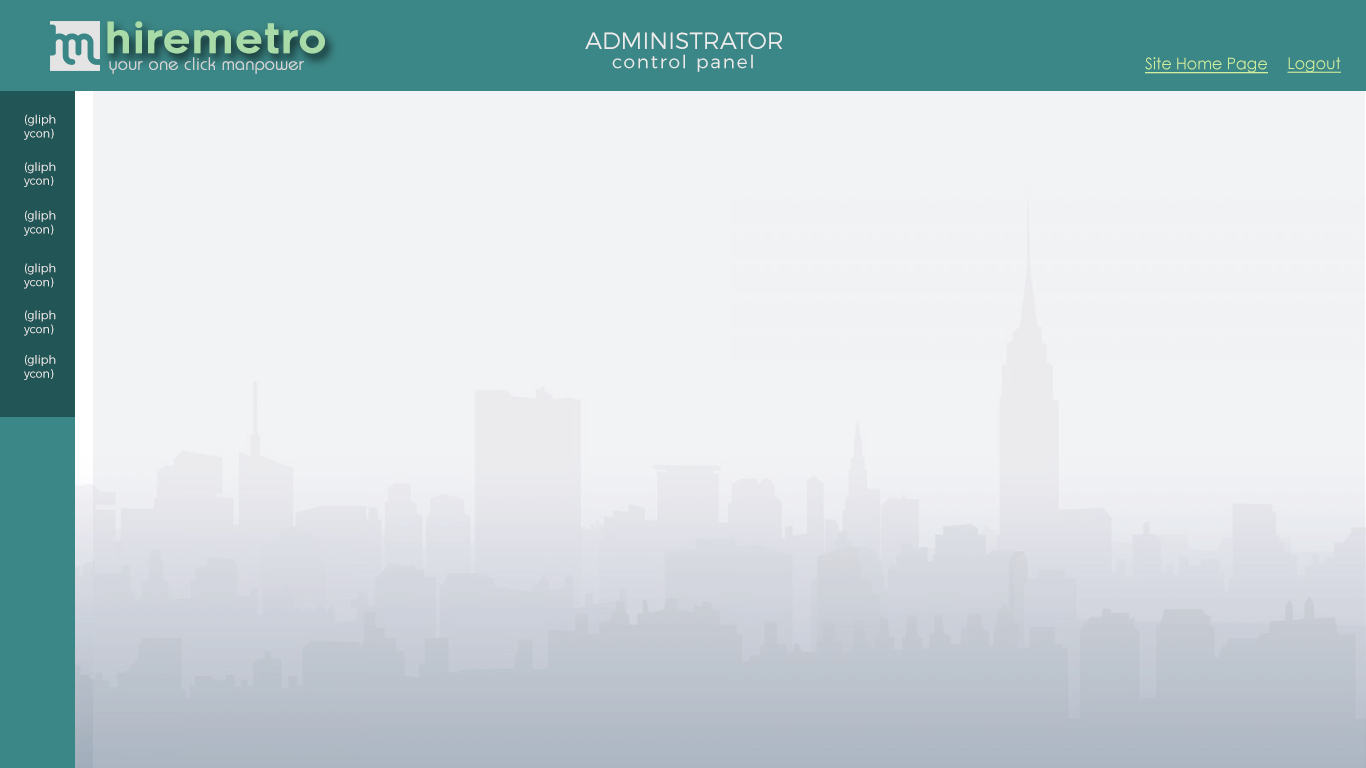
<style>
.page{position:relative;width:1366px;height:768px;background:#f2f3f5}
.page>*{position:absolute;margin:0}
.t1{font:42.1px "Renogare-Regular";color:#a8dba8}
.t2{font:23.6px "Montserrat-Light";color:#ebebeb}
.t3{font:18.4px "Montserrat-Light";letter-spacing:0.1em;color:#ebebeb}
.t4{font:17.5px "Brie-Light";color:#d5d5d5;font-weight:bold}
.t5{font:16.1px "CenturyGothic";color:#cff09e;text-decoration:underline}
.t6{font:11.5px "Montserrat-Light";color:#ebebeb}
</style>
<div class="page">
<p class="t1" style="left:107px;top:21px;width:218px;height:33px">hiremetro</p>
<p class="t2" style="left:585px;top:32px;width:198px;height:17px">ADMINISTRATOR</p>
<p class="t3" style="left:612px;top:54px;width:141px;height:18px">control panel</p>
<p class="t4" style="left:109px;top:57px;width:195px;height:17px">your one click manpower</p>
<p class="t5" style="left:1145px;top:57px;width:123px;height:17px">Site Home Page</p>
<p class="t5" style="left:1287px;top:57px;width:54px;height:16px">Logout</p>
<p class="t6" style="left:24px;top:114px;width:32px;height:26px">(gliph<br>ycon)</p>
<p class="t6" style="left:24px;top:162px;width:32px;height:25px">(gliph<br>ycon)</p>
<p class="t6" style="left:24px;top:210px;width:32px;height:26px">(gliph<br>ycon)</p>
<p class="t6" style="left:24px;top:263px;width:32px;height:26px">(gliph<br>ycon)</p>
<p class="t6" style="left:24px;top:310px;width:32px;height:26px">(gliph<br>ycon)</p>
<p class="t6" style="left:24px;top:355px;width:32px;height:25px">(gliph<br>ycon)</p>
</div>
